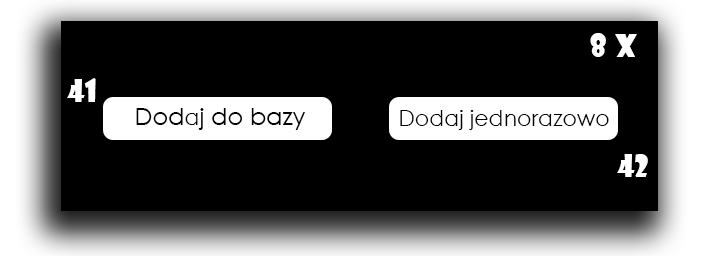
<style>
.page{position:relative;width:716px;height:256px;background:#000000}
.page>*{position:absolute;margin:0}
.t1{font:30px "ShowcardGothic-Reg";color:#ffffff}
.t2{font:30px "ShowcardGothic-Reg";color:#fffefe}
.t3{font:24px "CenturyGothic";color:#000000}
.t4{font:22px "CenturyGothic";color:#000000}
</style>
<div class="page">
<p class="t1" style="left:590px;top:33px;width:16px;height:24px">8</p>
<p class="t2" style="left:615px;top:34px;width:22px;height:23px">x</p>
<p class="t1" style="left:67px;top:78px;width:29px;height:24px">41</p>
<p class="t3" style="left:136px;top:108px;width:169px;height:22px">Dod<span class="t4">a</span>j do bazy</p>
<p class="t4" style="left:400px;top:110px;width:209px;height:20px">Dodaj jednorazowo</p>
<p class="t1" style="left:617px;top:154px;width:31px;height:23px">42</p>
</div>
